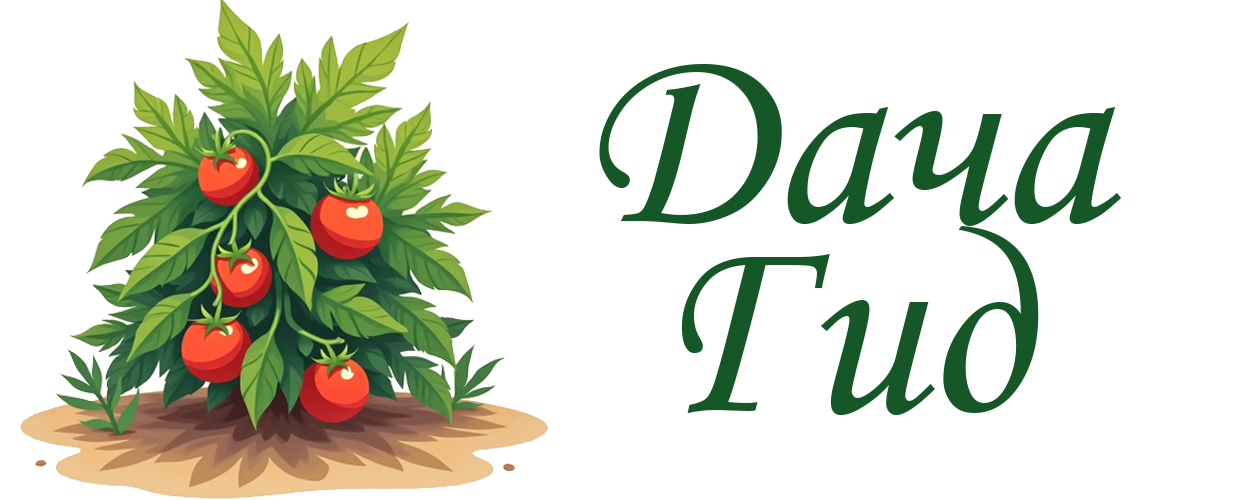
<style>
.page{position:relative;width:1250px;height:500px;background:#ffffff}
.page>*{position:absolute;margin:0}
.t1{font:266.7px "MonotypeCorsiva";color:#165727}
</style>
<div class="page">
<p class="t1" style="left:599px;top:64px;width:523px;height:162px">Дача</p>
<p class="t1" style="left:681px;top:226px;width:358px;height:189px">Гид</p>
</div>
